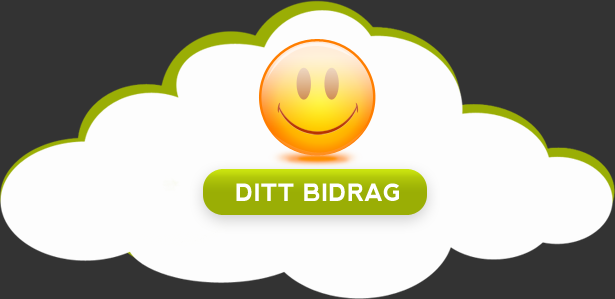
<style>
.page{position:relative;width:615px;height:299px;background:#fdfdfd}
.page>*{position:absolute;margin:0}
.t1{font:24px "nevis-Bold";color:#ffffff}
</style>
<div class="page">
<p class="t1" style="left:236px;top:183px;width:163px;height:18px">DITT BIDRAG</p>
</div>
